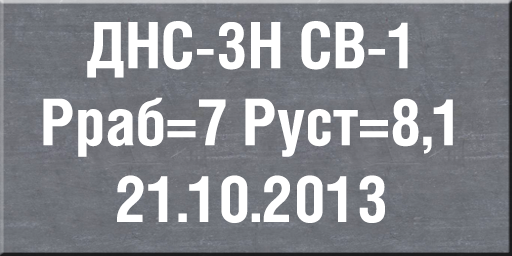
<style>
.page{position:relative;width:512px;height:256px}
.page>*{position:absolute;margin:0}
.t1{font:64px "HeliosCond-Bold";color:#ffffff}
</style>
<div class="page">
<p class="t1" style="left:43px;top:21px;width:410px;height:202px;text-align:center">ДНС-3Н СВ-1<br>Рраб=7 Руст=8,1<br>21.10.2013</p>
</div>
